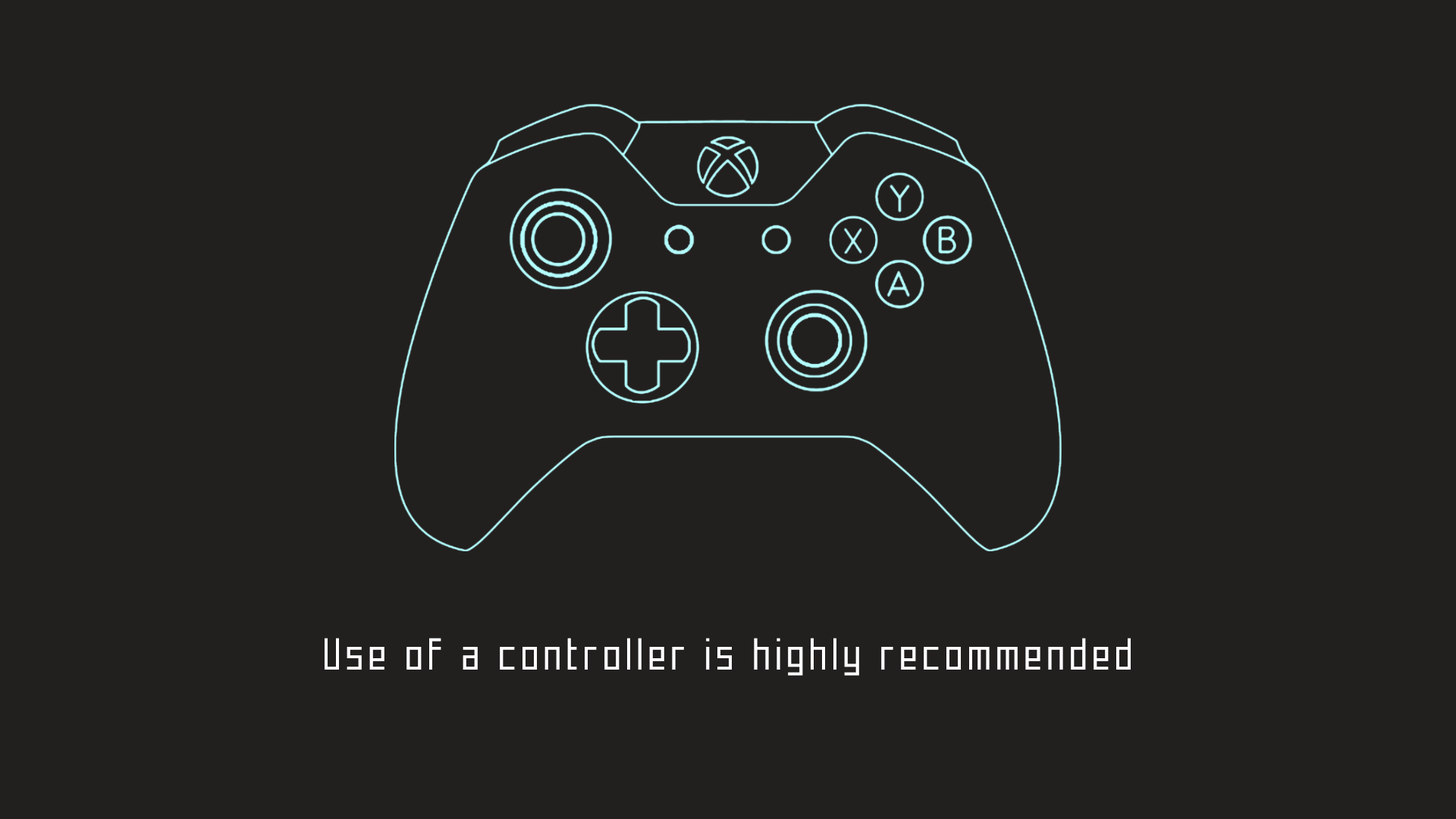
<style>
.page{position:relative;width:1456px;height:819px;background:#22201f}
.page>*{position:absolute;margin:0}
.t1{font:45.5px "Mecha";letter-spacing:0.06em;color:#ffffff}
</style>
<div class="page">
<p class="t1" style="left:325px;top:638px;width:806px;height:38px">Use of a controller is highly recommended</p>
</div>
